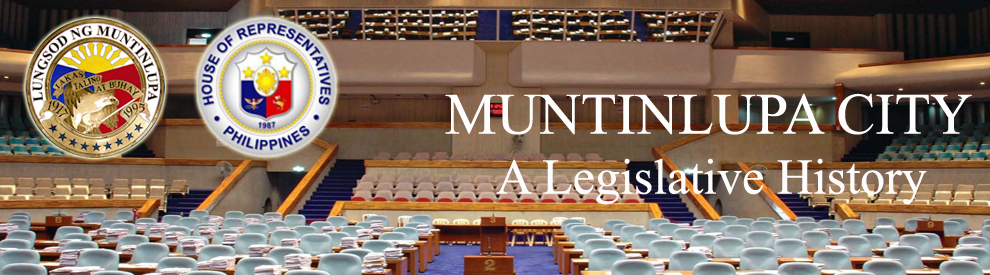
<style>
.page{position:relative;width:990px;height:275px}
.page>*{position:absolute;margin:0}
.t1{font:50px "TimesNewRomanPSMT";color:#fdfcfc}
.t2{font:58.3px "TimesNewRomanPSMT";color:#fdfdfd}
</style>
<div class="page">
<p class="t1" style="left:445px;top:93px;width:527px;height:112px;text-align:center"><span class="t2">MUNTINLUPA CITY<br></span>A Legislative History</p>
</div>
